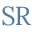
<style>
.page{position:relative;width:32px;height:32px;background:#ffffff}
.page>*{position:absolute;margin:0}
.t1{font:26px "Lora-Regular";letter-spacing:0.025em;color:#53799d;text-transform:uppercase}
</style>
<div class="page">
<p class="t1" style="left:2px;top:6px;width:29px;height:20px">SR</p>
</div>
